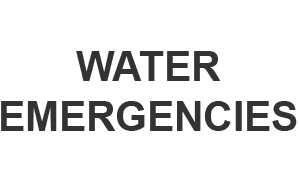
<style>
.page{position:relative;width:300px;height:180px;background:#ffffff}
.page>*{position:absolute;margin:0}
.t1{font:41px "Arial-BoldMT";color:#333333}
</style>
<div class="page">
<p class="t1" style="left:1px;top:51px;width:296px;height:80px;text-align:center">WATER<br>EMERGENCIES</p>
</div>
